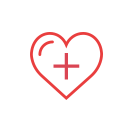
<style>
.page{position:relative;width:132px;height:132px;background:#ffffff}
.page>*{position:absolute;margin:0}
.t1{font:57.9px "Titillium-Light";color:#da4553}
</style>
<div class="page">
<p class="t1" style="left:53px;top:53px;width:27px;height:27px">+</p>
</div>
